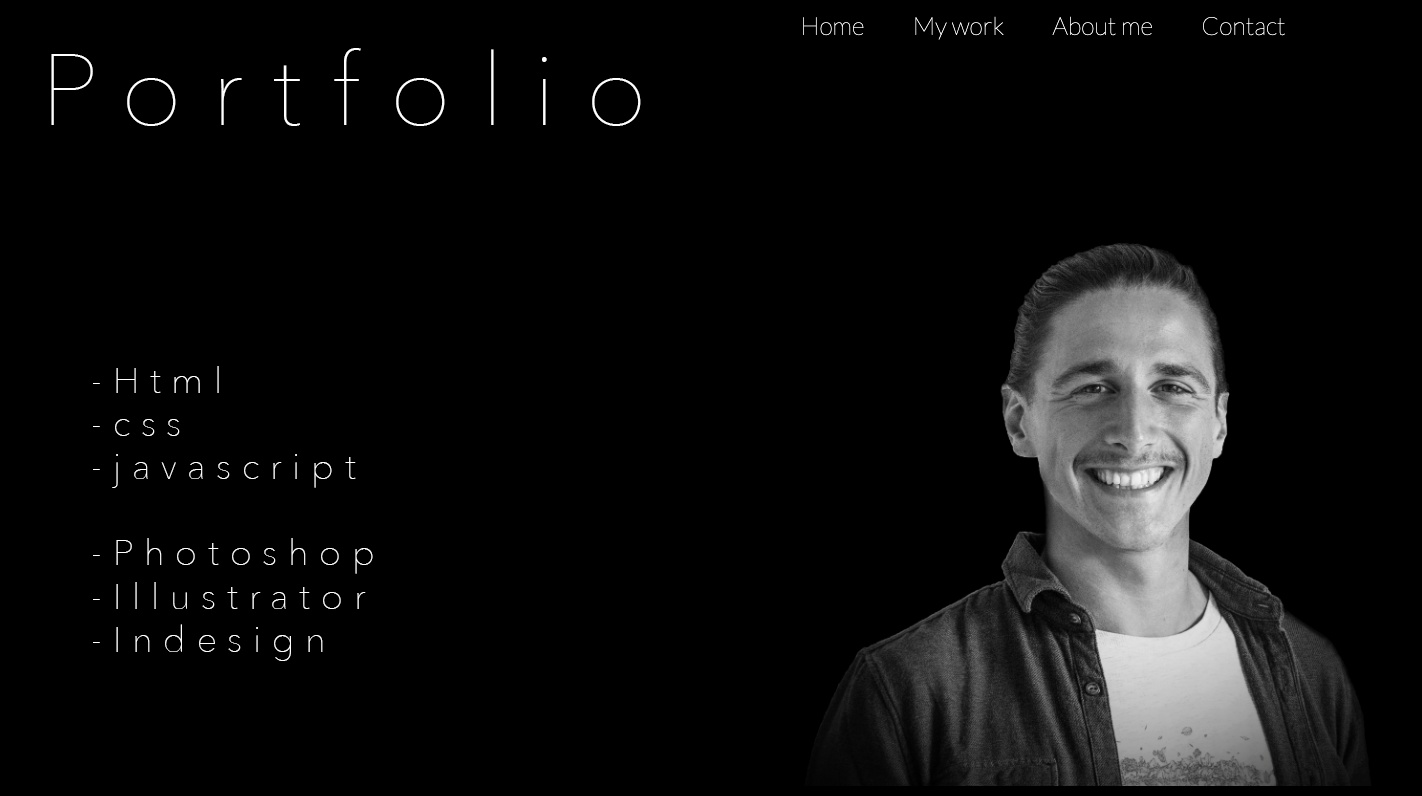
<style>
.page{position:relative;width:1422px;height:796px;background:#000000}
.page>*{position:absolute;margin:0}
.t1{font:100px "AvenirNext-UltraLight";letter-spacing:0.3em;color:#ffffff}
.t2{font:36px "AvenirNext-UltraLight";letter-spacing:0.3em;color:#ffffff}
</style>
<div class="page">
<p class="t1" style="left:51px;top:48px;width:590px;height:78px">Portfolio</p>
<p class="t2" style="left:93px;top:366px;width:280px;height:295px">-Html<br>-css<br>-javascript<br><br>-Photoshop<br>-Illustrator<br>-Indesign</p>
</div>
